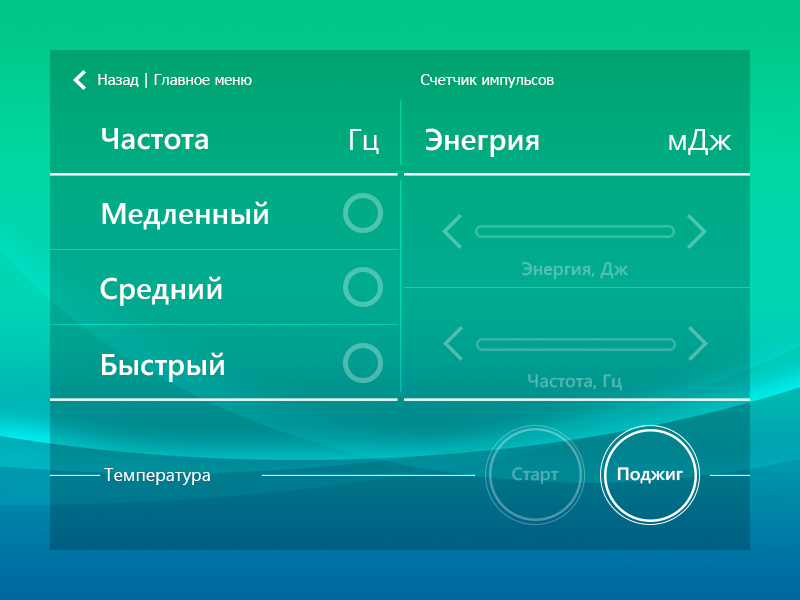
<style>
.page{position:relative;width:800px;height:600px}
.page>*{position:absolute;margin:0}
.t1{font:14.8px "Tahoma";color:#ffffff}
.t2{font:30px "MicrosoftMHei-Bold";color:#ffffff}
.t3{font:30px "SegoeUI";color:#ffffff}
.t4{font:18px "MicrosoftMHei-Bold";color:#4dc4b0}
.t5{font:18px "MicrosoftMHei-Bold";color:#4db6b1}
.t6{font:18px "SegoeUI";color:#ffffff}
.t7{font:17.8px "MicrosoftMHei-Bold";color:#4dabb6}
.t8{font:17.8px "MicrosoftMHei-Bold";color:#ffffff}
</style>
<div class="page">
<p class="t1" style="left:98px;top:73px;width:154px;height:15px">Назад | Главное меню</p>
<p class="t1" style="left:420px;top:74px;width:134px;height:14px">Счетчик импульсов</p>
<p class="t2" style="left:102px;top:128px;width:106px;height:22px">Частота</p>
<p class="t3" style="left:350px;top:129px;width:29px;height:25px">Гц</p>
<p class="t2" style="left:426px;top:128px;width:113px;height:29px">Энегрия</p>
<p class="t3" style="left:669px;top:129px;width:63px;height:26px">мДж</p>
<p class="t2" style="left:102px;top:201px;width:166px;height:29px">Медленный</p>
<p class="t4" style="left:522px;top:262px;width:106px;height:18px">Энергия, Дж</p>
<p class="t2" style="left:100px;top:276px;width:122px;height:30px">Средний</p>
<p class="t2" style="left:102px;top:352px;width:122px;height:30px">Быстрый</p>
<p class="t5" style="left:528px;top:374px;width:94px;height:17px">Частота, Гц</p>
<p class="t6" style="left:104px;top:468px;width:106px;height:17px">Температура</p>
<p class="t7" style="left:512px;top:467px;width:47px;height:18px">Старт</p>
<p class="t8" style="left:617px;top:467px;width:66px;height:17px">Поджиг</p>
</div>
